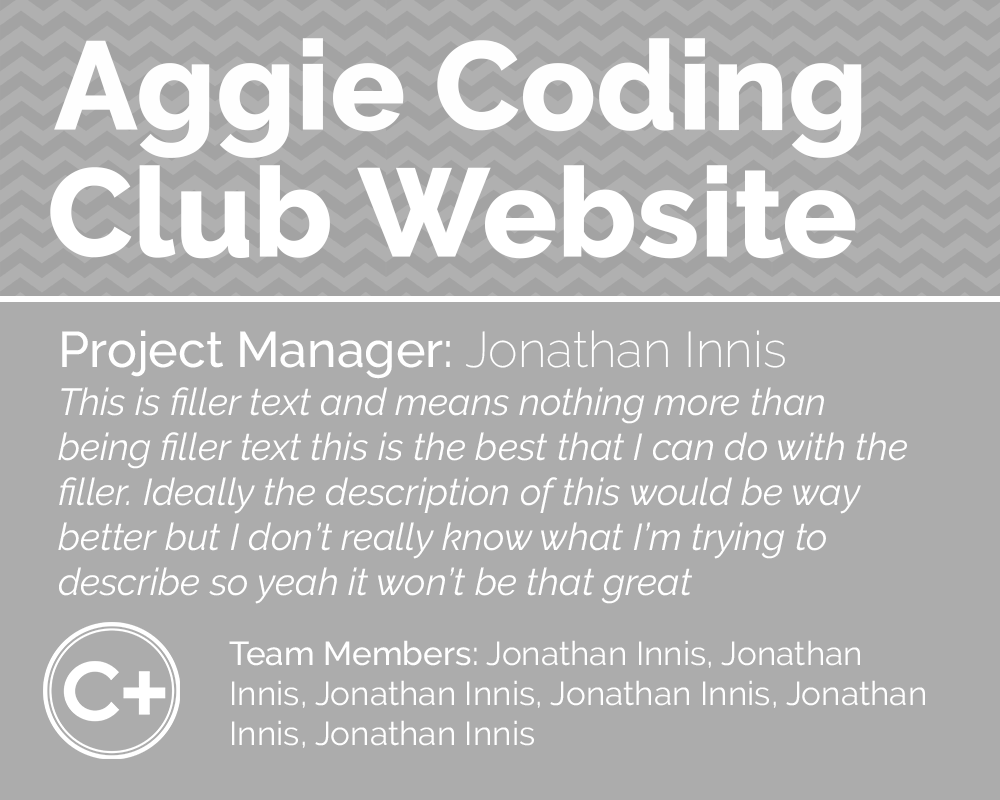
<style>
.page{position:relative;width:1000px;height:800px;background:#acacac}
.page>*{position:absolute;margin:0}
.t1{font:125px "Raleway-ExtraBold";color:#fefefe}
.t2{font:125px "Raleway-ExtraBold";color:#ffffff}
.t3{font:50px "Raleway-Medium";color:#ffffff}
.t4{font:50px "Raleway-ExtraLight";color:#ffffff}
.t5{font:37.5px "Raleway-Italic";color:#ffffff}
.t6{font:33.3px "Raleway-Regular";color:#ffffff}
.t7{font:33.3px "Raleway-Medium";color:#ffffff}
</style>
<div class="page">
<p class="t1" style="left:54px;top:38px;width:808px;height:120px">Aggie Coding</p>
<p class="t2" style="left:50px;top:165px;width:806px;height:94px">Club Website</p>
<p class="t3" style="left:62px;top:330px;width:723px;height:49px">Project Manager: <span class="t4">Jonathan Innis</span></p>
<p class="t5" style="left:58px;top:387px;width:849px;height:217px">This is filler text and means nothing more than being filler text this is the best that I can do with the filler. Ideally the description of this would be way better but I don’t really know what I’m trying to describe so yeah it won’t be that great</p>
<p class="t6" style="left:229px;top:640px;width:696px;height:108px"><span class="t7">Team Members:</span> Jonathan Innis, Jonathan Innis, Jonathan Innis, Jonathan Innis, Jonathan Innis, Jonathan Innis</p>
</div>
